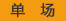
<style>
.page{position:relative;width:66px;height:21px;background:#f39c12}
.page>*{position:absolute;margin:0}
.t1{font:14.6px "MicrosoftYaHei";letter-spacing:1.02em;color:#333333;font-weight:bold}
</style>
<div class="page">
<p class="t1" style="left:10px;top:3px;width:45px;height:15px">单场</p>
</div>
